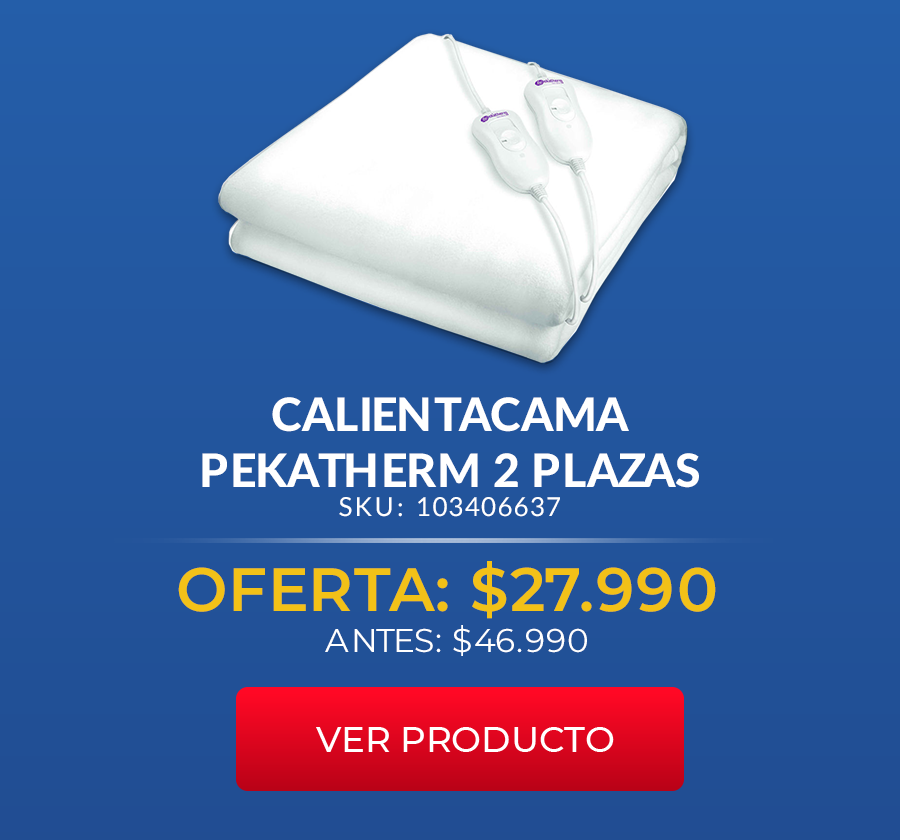
<style>
.page{position:relative;width:900px;height:840px}
.page>*{position:absolute;margin:0}
.t1{font:46.3px "Lato-Heavy";color:#ffffff;text-transform:uppercase}
.t2{font:26px "Lato-Regular";letter-spacing:0.105em;color:#ffffff;text-transform:uppercase}
.t3{font:61px "Montserrat-SemiBold";color:#f2c118;text-transform:uppercase}
.t4{font:32.8px "Montserrat-Regular";color:#ffffff;text-transform:uppercase}
</style>
<div class="page">
<p class="t1" style="left:202px;top:397px;width:497px;height:91px;text-align:center">Calientacama<br>Pekatherm 2 plazas</p>
<p class="t2" style="left:339px;top:497px;width:221px;height:20px">sku: 103406637</p>
<p class="t3" style="left:178px;top:561px;width:538px;height:58px">oferta: $27.990</p>
<p class="t4" style="left:325px;top:625px;width:262px;height:31px">antes: $46.990</p>
</div>
